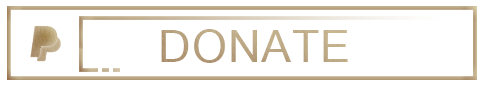
<style>
.page{position:relative;width:483px;height:86px;background:#ffffff}
.page>*{position:absolute;margin:0}
.t1{font:45px "MicrosoftSansSerif";letter-spacing:0.02em;color:#bba784}
</style>
<div class="page">
<p class="t1" style="left:161px;top:29px;width:187px;height:34px">DONATE</p>
</div>
